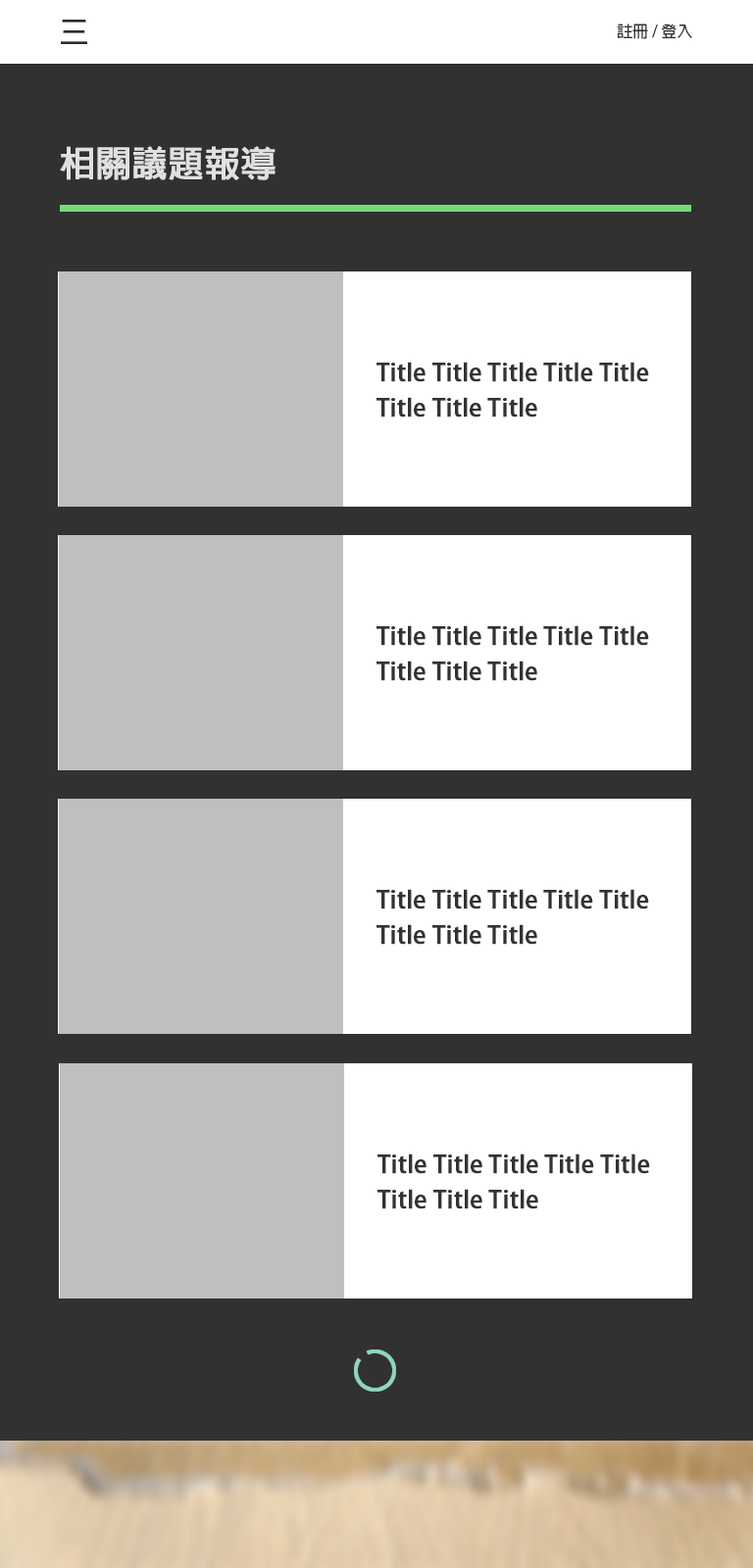
<style>
.page{position:relative;width:753px;height:1568px;background:#313131}
.page>*{position:absolute;margin:0}
.t1{font:29.4px "AdobeFanHeitiStd-Bold";color:#2e2c2c}
.t2{font:15.7px "AdobeFanHeitiStd-Bold";color:#333333}
.t3{font:35.3px "AdobeFanHeitiStd-Bold";color:#e0e0e0;font-weight:bold}
.t4{font:23.5px/35.3px "AdobeFanHeitiStd-Bold";color:#333333;font-weight:bold}
</style>
<div class="page">
<p class="t1" style="left:61px;top:20px;width:26px;height:24px">三</p>
<p class="t2" style="left:616px;top:24px;width:76px;height:15px">註冊 / 登入</p>
<p class="t3" style="left:60px;top:146px;width:215px;height:34px">相關議題報導</p>
<p class="t4" style="left:376px;top:362px;width:273px;height:55px">Title Title Title Title Title<br>Title Title Title</p>
<p class="t4" style="left:376px;top:625px;width:273px;height:56px">Title Title Title Title Title<br>Title Title Title</p>
<p class="t4" style="left:376px;top:889px;width:273px;height:56px">Title Title Title Title Title<br>Title Title Title</p>
<p class="t4" style="left:377px;top:1153px;width:273px;height:56px">Title Title Title Title Title<br>Title Title Title</p>
</div>
